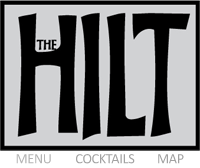
<style>
.page{position:relative;width:200px;height:168px;background:#d1d2d4}
.page>*{position:absolute;margin:0}
.t1{font:14.1px "OpenSymbol";letter-spacing:-0.02em;color:#b4b4b4}
.t2{font:14.1px "Calibri";letter-spacing:-0.02em;color:#b4b4b4}
.t3{font:14.1px "Calibri";letter-spacing:-0.02em;color:#a2a2a2}
</style>
<div class="page">
<p class="t1" style="left:16px;top:154px;width:35px;height:10px">Mendfdf<span class="t2">MENU</span></p>
<p class="t3" style="left:76px;top:154px;width:59px;height:10px">COCKTAILS</p>
<p class="t3" style="left:158px;top:154px;width:26px;height:10px">MAP</p>
</div>
